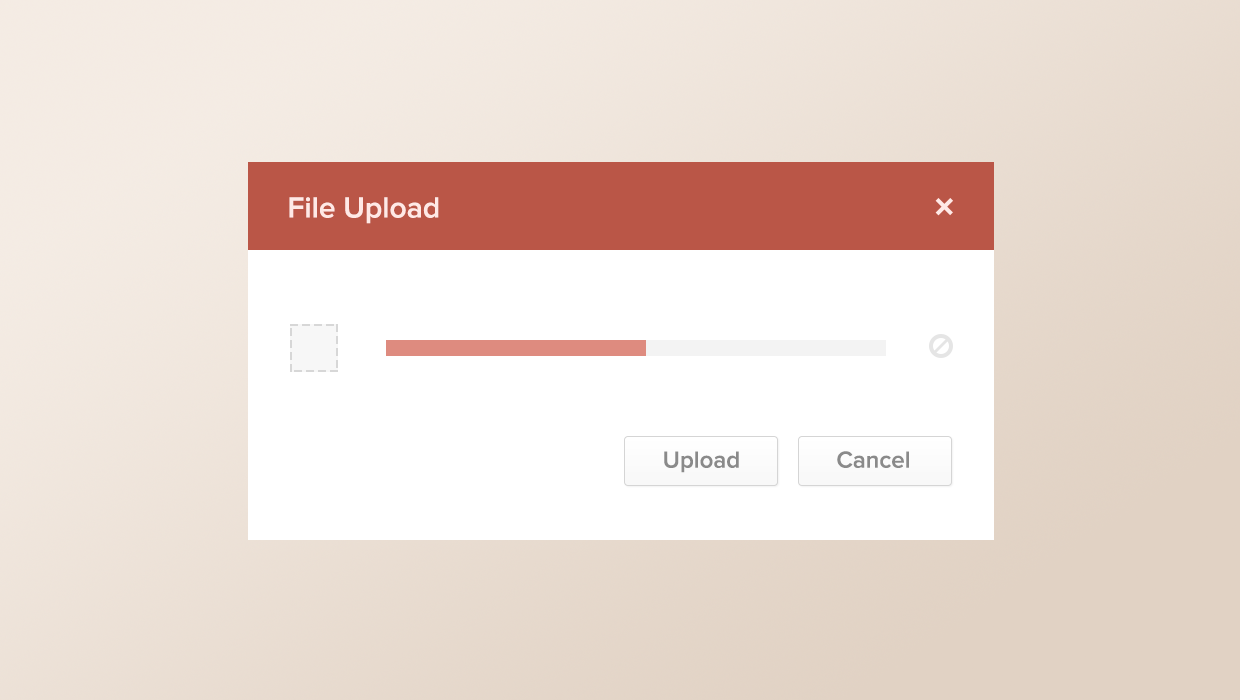
<style>
.page{position:relative;width:1240px;height:700px;background:#ffffff}
.page>*{position:absolute;margin:0}
.t1{font:30px "ProximaNova-Semibold";color:#ffe9e6}
.t2{font:24px "ProximaNova-Semibold";color:#8a8a8a}
</style>
<div class="page">
<p class="t1" style="left:289px;top:197px;width:150px;height:27px">File Upload</p>
<p class="t2" style="left:664px;top:451px;width:75px;height:22px">Upload</p>
<p class="t2" style="left:837px;top:451px;width:72px;height:17px">Cancel</p>
</div>
